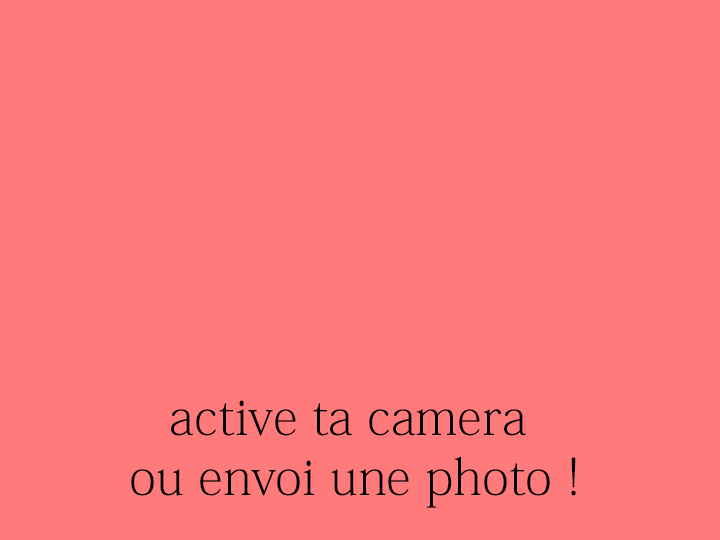
<style>
.page{position:relative;width:720px;height:540px;background:#ff7a7a}
.page>*{position:absolute;margin:0}
.t1{font:50px "KozMinPr6N-ExtraLight";color:#000000}
</style>
<div class="page">
<p class="t1" style="left:131px;top:400px;width:445px;height:108px;text-align:center">active ta camera <br>ou envoi une photo !</p>
</div>
